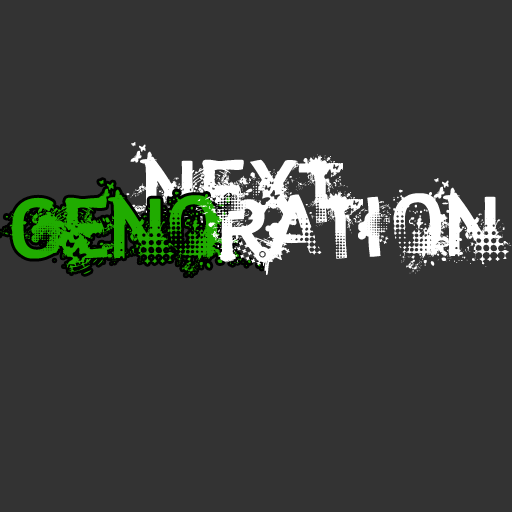
<style>
.page{position:relative;width:512px;height:512px;background:#333333}
.page>*{position:absolute;margin:0}
.t1{font:100px "trashco";color:#ffffff}
</style>
<div class="page">
<p class="t1" style="left:107px;top:142px;width:241px;height:94px">next</p>
<p class="t1" style="left:196px;top:178px;width:318px;height:97px">ration</p>
</div>
